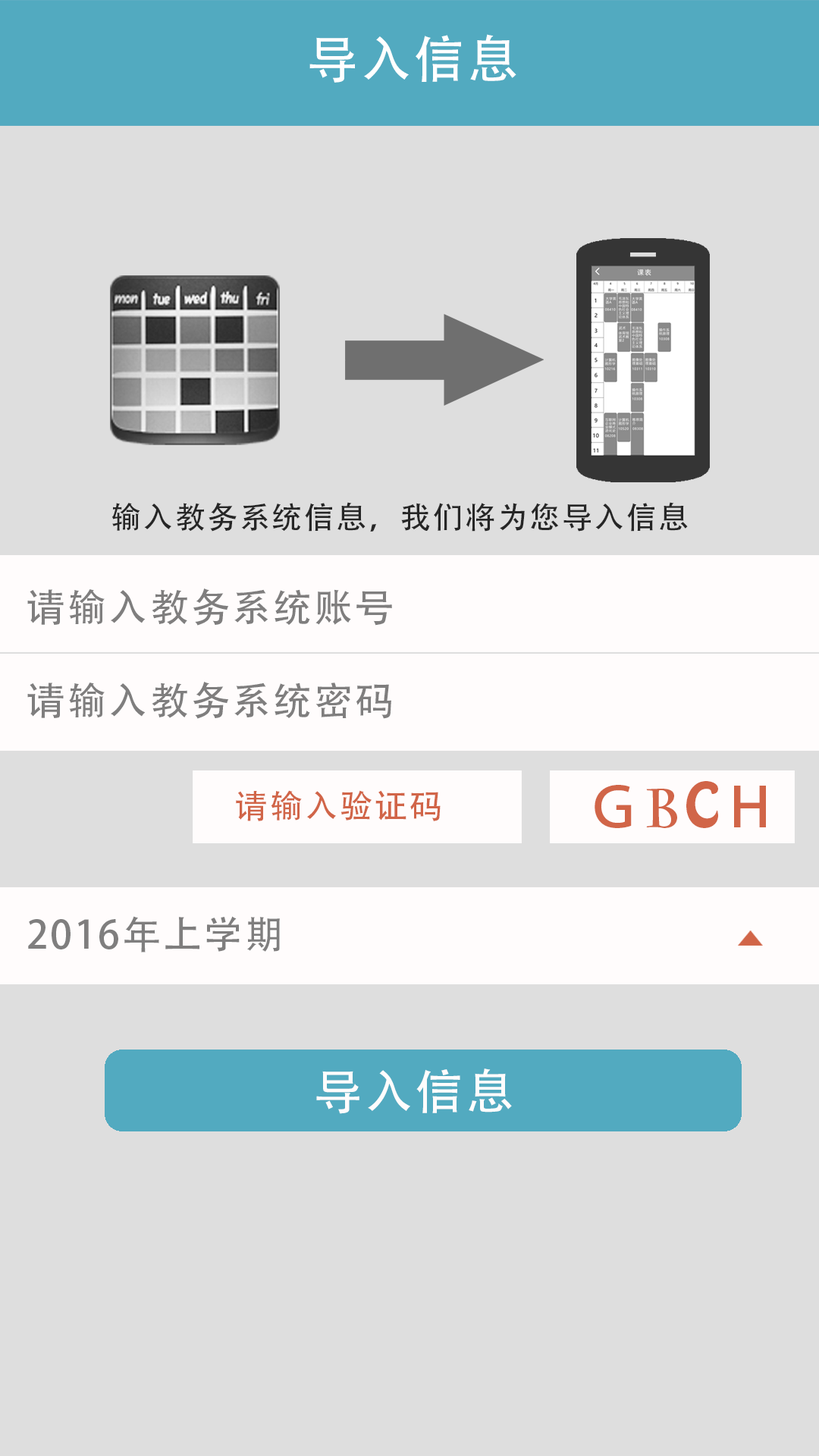
<style>
.page{position:relative;width:819px;height:1456px;background:#dedede}
.page>*{position:absolute;margin:0}
.t1{font:50.8px "AdobeHeitiStd-Regular";letter-spacing:0.06em;color:#ffffff}
.t2{font:30.4px "AdobeHeitiStd-Regular";letter-spacing:0.06em;color:#262626}
.t3{font:38.7px "AdobeHeitiStd-Regular";letter-spacing:0.06em;color:#7f7e7e}
.t4{font:54.6px "AdobeHeitiStd-Regular";letter-spacing:0.06em;color:#d16548}
.t5{font:54.6px "CharlemagneStd-Bold";letter-spacing:0.06em;color:#d16548}
.t6{font:54.6px "HoboStd";letter-spacing:0.06em;color:#d16548}
.t7{font:32.8px "AdobeHeitiStd-Regular";letter-spacing:0.06em;color:#d16548}
.t8{font:47.8px "AdobeHeitiStd-Regular";letter-spacing:0.06em;color:#fffcfc}
</style>
<div class="page">
<p class="t1" style="left:309px;top:34px;width:207px;height:49px">导入信息</p>
<p class="t2" style="left:111px;top:502px;width:577px;height:30px">输入教务系统信息，我们将为您导入信息</p>
<p class="t3" style="left:27px;top:588px;width:365px;height:38px">请输入教务系统账号</p>
<p class="t3" style="left:27px;top:682px;width:364px;height:37px">请输入教务系统密码</p>
<p class="t4" style="left:595px;top:781px;width:171px;height:47px">Ｇ<span class="t5">B</span><span class="t6">C</span>Ｈ</p>
<p class="t7" style="left:236px;top:790px;width:205px;height:31px">请输入验证码</p>
<p class="t3" style="left:28px;top:916px;width:252px;height:36px">2016年上学期</p>
<p class="t8" style="left:316px;top:1068px;width:196px;height:46px">导入信息</p>
</div>
